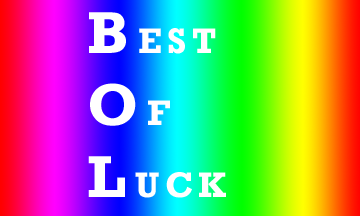
<style>
.page{position:relative;width:360px;height:216px}
.page>*{position:absolute;margin:0}
.t1{font:36px "Rockwell-Bold";letter-spacing:0.15em;color:#ffffff}
.t2{font:60px "Rockwell-Bold";letter-spacing:0.15em;color:#ffffff}
</style>
<div class="page">
<p class="t1" style="left:88px;top:12px;width:138px;height:186px"><span class="t2">B</span>EST<br><span class="t2">O</span>F<br><span class="t2">L</span>UCK</p>
</div>
